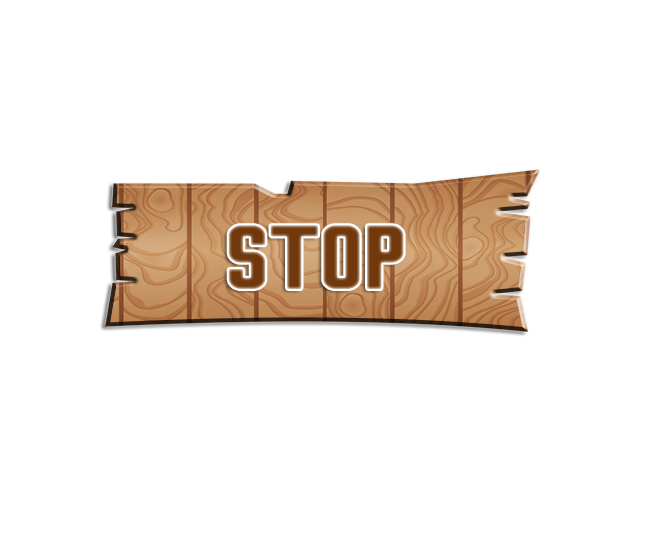
<style>
.page{position:relative;width:650px;height:536px;background:#ffffff}
.page>*{position:absolute;margin:0}
.t1{font:70px "BrewmasterGothicRound";color:#70380b;scale:1.26 1}
</style>
<div class="page">
<p class="t1" style="left:228px;top:225px;width:176px;height:64px">stop</p>
</div>
